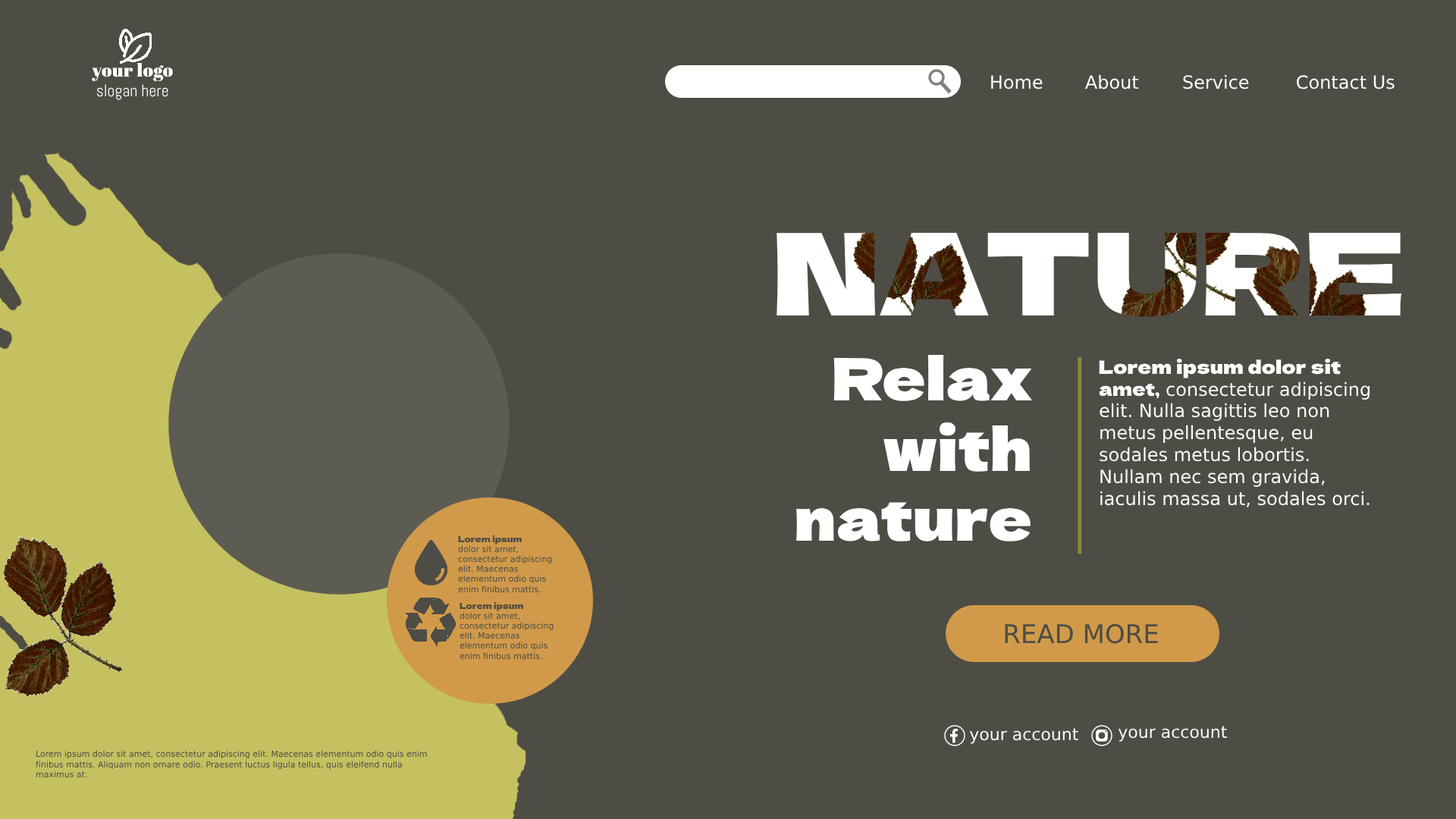
<style>
.page{position:relative;width:1456px;height:819px;background:#4d4d45}
.page>*{position:absolute;margin:0}
.t1{font:16.7px "Abel-Regular";color:#ffffff}
.t2{font:18.2px "AbrilFatface-Regular";color:#ffffff;font-weight:bold}
.t3{font:18.2px "DejaVuSans";color:#ffffff}
.t4{font:18.2px "DejaVuSans";color:#000000}
.t5{font:113.7px "DelaGothicOne-Regular";color:#ffffff;font-weight:bold}
.t6{font:58.4px "DelaGothicOne-Regular";color:#ffffff;font-weight:bold}
.t7{font:18.2px "DelaGothicOne-Regular";color:#d19a4a;font-weight:bold}
.t8{font:18.2px "DelaGothicOne-Regular";color:#ffffff}
.t9{font:8.3px "DejaVuSans";color:#4d4d45}
.t10{font:8.3px "DelaGothicOne-Regular";color:#4d4d45}
.t11{font:25.8px "DejaVuSans";color:#4d4d45}
.t12{font:16.7px "DejaVuSans";color:#ffffff}
.t13{font:16.7px "DejaVuSans";color:#4d4d45}
</style>
<div class="page">
<p class="t1" style="left:92px;top:63px;width:81px;height:37px;text-align:center"><span class="t2">your logo<br></span>slogan here</p>
<p class="t3" style="left:991px;top:75px;width:52px;height:14px">Home</p>
<p class="t3" style="left:1084px;top:74px;width:55px;height:15px"><span class="t4">A</span>bout</p>
<p class="t3" style="left:1183px;top:74px;width:66px;height:15px">Service</p>
<p class="t3" style="left:1297px;top:75px;width:98px;height:14px">Contact Us</p>
<p class="t5" style="left:777px;top:232px;width:625px;height:85px">NATURE</p>
<p class="t6" style="left:796px;top:354px;width:237px;height:187px;text-align:right">Relax<br>with<br>nature</p>
<p class="t3" style="left:1099px;top:359px;width:271px;height:148px"><span class="t7">Lorem ipsum dolor sit </span><span class="t8">amet,</span> consectetur adipiscing elit. Nulla sagittis leo non metus pellentesque, eu sodales metus lobortis. Nullam nec sem gravida, iaculis massa ut, sodales orci.</p>
<p class="t9" style="left:458px;top:535px;width:94px;height:58px"><span class="t10">Lorem ipsum <br></span>dolor sit amet, consectetur adipiscing elit. Maecenas elementum odio quis enim finibus mattis.</p>
<p class="t9" style="left:460px;top:601px;width:94px;height:59px"><span class="t10">Lorem ipsum <br></span>dolor sit amet, consectetur adipiscing elit. Maecenas elementum odio quis enim finibus mattis.</p>
<p class="t11" style="left:1005px;top:623px;width:153px;height:21px">READ MORE</p>
<p class="t12" style="left:1118px;top:726px;width:109px;height:16px"><span class="t13">y</span>our account</p>
<p class="t12" style="left:969px;top:728px;width:109px;height:16px">your account</p>
<p class="t9" style="left:36px;top:750px;width:391px;height:28px">Lorem ipsum dolor sit amet, consectetur adipiscing elit. Maecenas elementum odio quis enim finibus mattis. Aliquam non ornare odio. Praesent luctus ligula tellus, quis eleifend nulla maximus at.</p>
</div>
